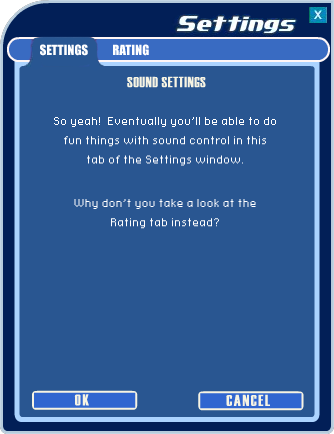
<style>
.page{position:relative;width:334px;height:434px;background:#295691}
.page>*{position:absolute;margin:0}
.t1{font:13px "Impact";color:#ffffff}
.t2{font:16px "Foxley816";color:#ffffff}
</style>
<div class="page">
<p class="t1" style="left:40px;top:44px;width:48px;height:12px">SETTINGS</p>
<p class="t1" style="left:113px;top:44px;width:36px;height:12px">RATING</p>
<p class="t2" style="left:54px;top:117px;width:222px;height:49px;text-align:center">So yeah!  Eventually you’ll be able to do<br>fun things with sound control in this<br>tab of the Settings window.</p>
<p class="t2" style="left:74px;top:199px;width:182px;height:30px;text-align:center">Why don’t you take a look at the<br>Rating tab instead?</p>
</div>
